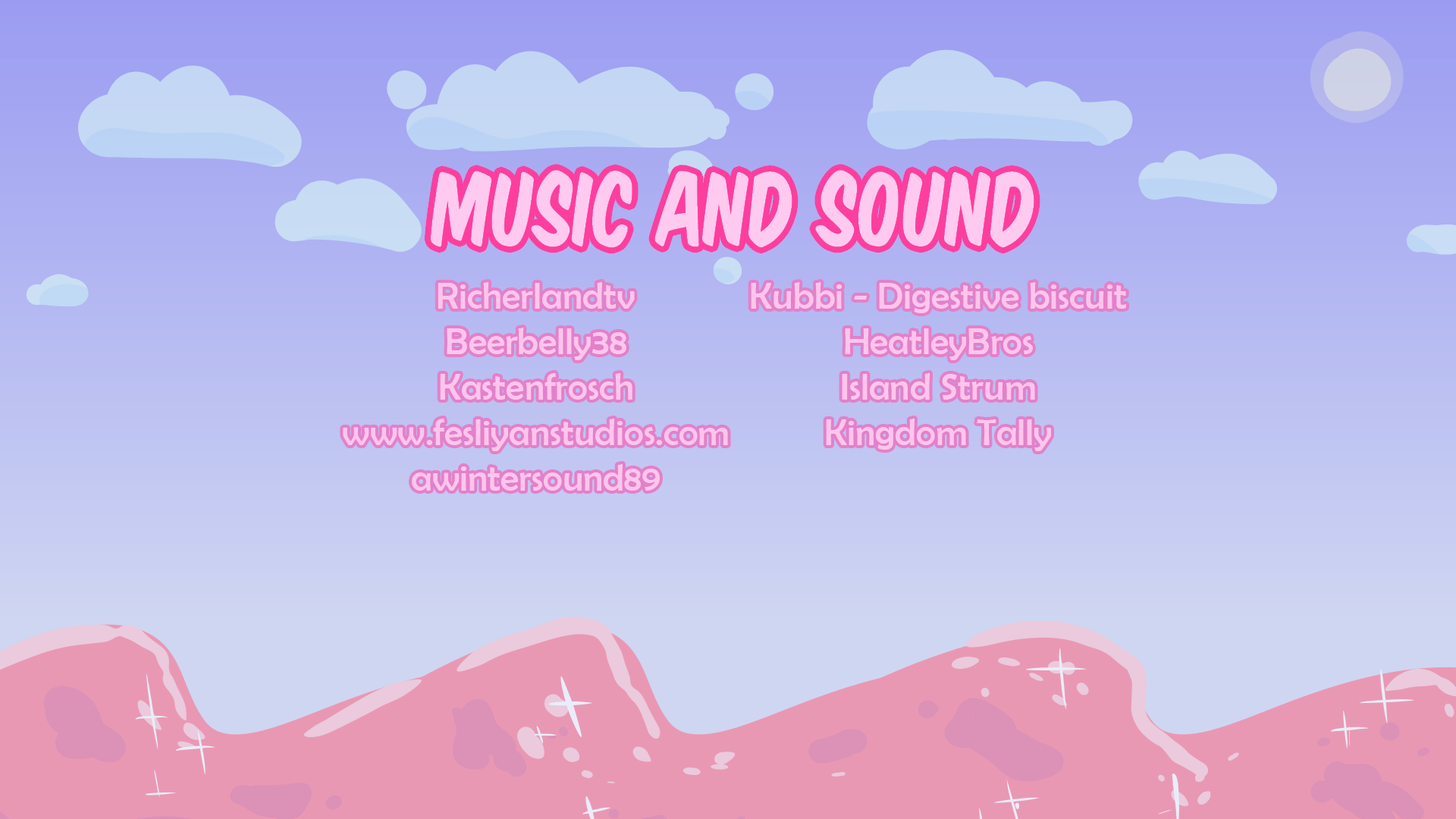
<style>
.page{position:relative;width:1456px;height:819px}
.page>*{position:absolute;margin:0}
.t1{font:37.9px "BerlinSansFB-Reg";color:#ffc5ed}
</style>
<div class="page">
<p class="t1" style="left:343px;top:282px;width:385px;height:209px;text-align:center">Richerlandtv<br>Beerbelly38<br>Kastenfrosch<br>www.fesliyanstudios.com<br>awintersound89</p>
<p class="t1" style="left:751px;top:282px;width:376px;height:169px;text-align:center">Kubbi - Digestive biscuit<br>HeatleyBros<br>Island Strum<br>Kingdom Tally</p>
</div>
